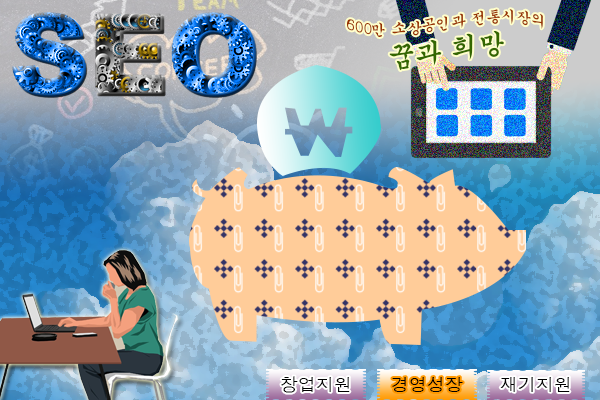
<style>
.page{position:relative;width:600px;height:400px}
.page>*{position:absolute;margin:0}
.t1{font:15px "Gungsuh";color:#993300}
.t2{font:27px "Gungsuh";color:#336600}
.t3{font:17.8px "Dotum";color:#000000}
</style>
<div class="page">
<p class="t1" style="left:346px;top:9px;width:197px;height:62px;text-align:center">600만 소상공인과 전통시장의<br><span class="t2">꿈과 희망</span></p>
<p class="t3" style="left:281px;top:376px;width:69px;height:17px">창업지원</p>
<p class="t3" style="left:392px;top:377px;width:71px;height:15px">경영성장</p>
<p class="t3" style="left:500px;top:377px;width:70px;height:15px">재기지원</p>
</div>
